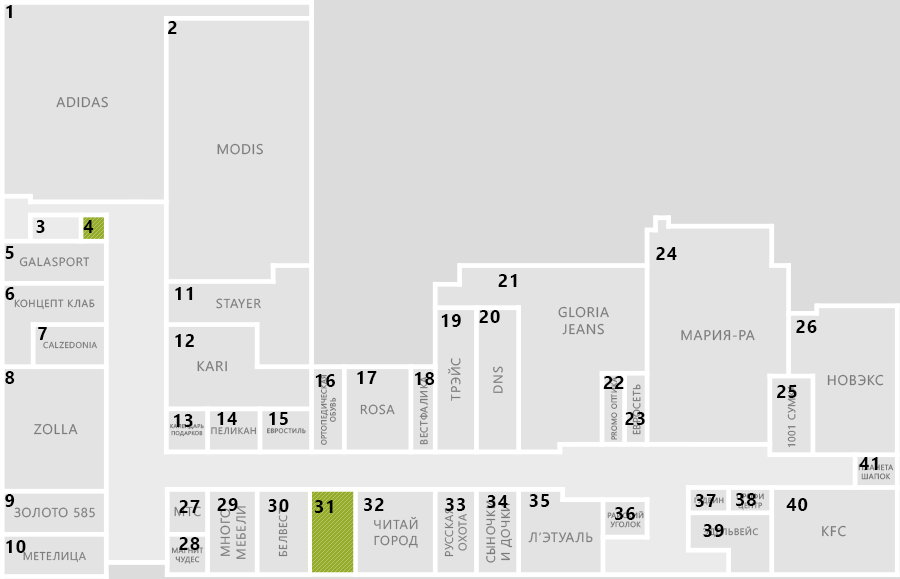
<style>
.page{position:relative;width:900px;height:579px;background:#e3e3e3}
.page>*{position:absolute;margin:0}
.t1{font:18px "SegoeUI-Bold";letter-spacing:0.05em;color:#000000;text-transform:uppercase}
.t2{font:14px "SegoeUI";letter-spacing:0.05em;color:#7c7c7c;text-transform:uppercase}
.t3{font:12px "SegoeUI";letter-spacing:0.05em;color:#7c7c7c;text-transform:uppercase}
.t4{font:10.3px "SegoeUI";letter-spacing:0.05em;color:#7c7c7c;text-transform:uppercase}
.t5{font:13.1px "SegoeUI";letter-spacing:0.05em;color:#7c7c7c;text-transform:uppercase}
.t6{font:8.4px "SegoeUI";letter-spacing:0.05em;color:#7c7c7c;text-transform:uppercase}
.t7{font:7.5px "SegoeUI";letter-spacing:0.05em;color:#7c7c7c;text-transform:uppercase}
.t8{font:5.6px "SegoeUI";letter-spacing:0.05em;color:#7c7c7c;text-transform:uppercase}
.t9{font:9.4px "SegoeUI";letter-spacing:0.05em;color:#7c7c7c;text-transform:uppercase}
.t10{font:6.6px "SegoeUI";letter-spacing:0.05em;color:#7c7c7c;text-transform:uppercase}
.t11{font:7.5px "SegoeUI";letter-spacing:0.05em;text-transform:uppercase}
.t12{font:11.2px "SegoeUI";letter-spacing:0.05em;color:#7c7c7c;text-transform:uppercase}
.t13{font:12.2px "SegoeUI";letter-spacing:0.05em;color:#7c7c7c;text-transform:uppercase}
.t14{font:13.5px "SegoeUI";letter-spacing:0.05em;color:#7c7c7c;text-transform:uppercase}
</style>
<div class="page">
<p class="t1" style="left:6px;top:5px;width:6px;height:13px">1</p>
<p class="t1" style="left:168px;top:21px;width:9px;height:13px">2</p>
<p class="t2" style="left:56px;top:96px;width:52px;height:12px">Adidas</p>
<p class="t2" style="left:217px;top:143px;width:46px;height:12px">MODIS</p>
<p class="t1" style="left:36px;top:220px;width:9px;height:13px">3</p>
<p class="t1" style="left:83px;top:220px;width:11px;height:13px">4</p>
<p class="t1" style="left:5px;top:246px;width:9px;height:13px">5</p>
<p class="t3" style="left:19px;top:257px;width:71px;height:10px">Galasport</p>
<p class="t1" style="left:656px;top:247px;width:21px;height:13px">24</p>
<p class="t1" style="left:498px;top:274px;width:19px;height:13px">21</p>
<p class="t1" style="left:5px;top:287px;width:10px;height:13px">6</p>
<p class="t1" style="left:175px;top:287px;width:18px;height:13px">11</p>
<p class="t4" style="left:14px;top:299px;width:81px;height:11px">Концепт Клаб</p>
<p class="t5" style="left:216px;top:298px;width:45px;height:11px">Stayer</p>
<p class="t1" style="left:441px;top:314px;width:20px;height:13px">19</p>
<p class="t1" style="left:479px;top:310px;width:21px;height:13px">20</p>
<p class="t2" style="left:558px;top:306px;width:51px;height:29px;text-align:center">Gloria<br>jeans</p>
<p class="t1" style="left:38px;top:327px;width:9px;height:13px">7</p>
<p class="t1" style="left:796px;top:320px;width:21px;height:13px">26</p>
<p class="t6" style="left:43px;top:341px;width:54px;height:8px">calzedonia</p>
<p class="t1" style="left:175px;top:334px;width:19px;height:13px">12</p>
<p class="t2" style="left:681px;top:330px;width:74px;height:11px">Мария-ра</p>
<p class="t2" style="left:197px;top:361px;width:30px;height:11px">Kari</p>
<p class="t5" style="left:448px;top:358px;width:13px;height:43px;rotate:-90deg">Трэйс</p>
<p class="t5" style="left:493px;top:366px;width:10px;height:27px;rotate:-90deg">Dns</p>
<p class="t1" style="left:5px;top:371px;width:10px;height:13px">8</p>
<p class="t1" style="left:315px;top:374px;width:20px;height:13px">16</p>
<p class="t7" style="left:321px;top:375px;width:15px;height:70px;text-align:center;rotate:-90deg">Ортопедическая<br>обувь</p>
<p class="t1" style="left:357px;top:371px;width:20px;height:13px">17</p>
<p class="t1" style="left:415px;top:372px;width:20px;height:13px">18</p>
<p class="t4" style="left:419px;top:376px;width:9px;height:69px;rotate:-90deg">Вестфалика</p>
<p class="t1" style="left:603px;top:376px;width:21px;height:13px">22</p>
<p class="t7" style="left:611px;top:377px;width:6px;height:63px;rotate:-90deg">Promo оптика</p>
<p class="t2" style="left:827px;top:374px;width:57px;height:12px">Новэкс</p>
<p class="t4" style="left:632px;top:384px;width:9px;height:51px;rotate:-90deg">Евросеть</p>
<p class="t1" style="left:777px;top:385px;width:20px;height:13px">25</p>
<p class="t4" style="left:787px;top:384px;width:9px;height:63px;rotate:-90deg">1001 сумка</p>
<p class="t1" style="left:174px;top:414px;width:19px;height:13px">13</p>
<p class="t1" style="left:217px;top:412px;width:20px;height:13px">14</p>
<p class="t1" style="left:269px;top:412px;width:19px;height:13px">15</p>
<p class="t5" style="left:360px;top:404px;width:35px;height:11px">rOSA</p>
<p class="t1" style="left:625px;top:412px;width:20px;height:13px">23</p>
<p class="t2" style="left:33px;top:423px;width:45px;height:12px">Zolla</p>
<p class="t8" style="left:170px;top:424px;width:34px;height:13px;text-align:center">Календарь<br>подарков</p>
<p class="t9" style="left:211px;top:427px;width:45px;height:8px">Пеликан</p>
<p class="t10" style="left:267px;top:428px;width:39px;height:6px">Евростиль</p>
<p class="t1" style="left:859px;top:457px;width:19px;height:13px">41</p>
<p class="t7" style="left:858px;top:464px;width:36px;height:16px;text-align:center">Планета<br>шапок</p>
<p class="t1" style="left:5px;top:494px;width:10px;height:13px">9</p>
<p class="t1" style="left:487px;top:495px;width:21px;height:13px">34</p>
<p class="t1" style="left:529px;top:494px;width:21px;height:13px">35</p>
<p class="t11" style="left:694px;top:497px;width:30px;height:8px">Гудвин</p>
<p class="t1" style="left:695px;top:494px;width:21px;height:13px">37</p>
<p class="t1" style="left:736px;top:493px;width:20px;height:13px">38</p>
<p class="t5" style="left:14px;top:507px;width:81px;height:11px">Золото 585</p>
<p class="t5" style="left:174px;top:506px;width:27px;height:11px">Мтс</p>
<p class="t1" style="left:179px;top:500px;width:21px;height:13px">27</p>
<p class="t1" style="left:217px;top:498px;width:21px;height:13px">29</p>
<p class="t5" style="left:220px;top:506px;width:26px;height:53px;text-align:center;rotate:-90deg">Много<br>мебели</p>
<p class="t1" style="left:268px;top:499px;width:21px;height:13px">30</p>
<p class="t12" style="left:278px;top:508px;width:10px;height:49px;rotate:-90deg">Белвест</p>
<p class="t1" style="left:315px;top:500px;width:18px;height:13px">31</p>
<p class="t1" style="left:364px;top:498px;width:20px;height:13px">32</p>
<p class="t12" style="left:444px;top:508px;width:23px;height:49px;text-align:center;rotate:-90deg">Русская<br>охота</p>
<p class="t1" style="left:445px;top:498px;width:20px;height:13px">33</p>
<p class="t13" style="left:486px;top:500px;width:27px;height:63px;text-align:center;rotate:-90deg">Сыночки<br>и дочки</p>
<p class="t1" style="left:615px;top:507px;width:20px;height:13px">36</p>
<p class="t1" style="left:786px;top:498px;width:22px;height:13px">40</p>
<p class="t5" style="left:374px;top:516px;width:44px;height:32px;text-align:center">Читай<br>город</p>
<p class="t11" style="left:607px;top:511px;width:37px;height:17px;text-align:center">Райский<br>уголок</p>
<p class="t14" style="left:528px;top:532px;width:65px;height:11px">Л’ЭТУАЛЬ</p>
<p class="t1" style="left:703px;top:524px;width:21px;height:13px">39</p>
<p class="t2" style="left:822px;top:525px;width:24px;height:12px">KFC</p>
<p class="t1" style="left:6px;top:540px;width:20px;height:13px">10</p>
<p class="t1" style="left:179px;top:537px;width:21px;height:13px">28</p>
<p class="t12" style="left:23px;top:551px;width:63px;height:12px">Метелица</p>
<p class="t7" style="left:172px;top:547px;width:32px;height:17px;text-align:center">Магнит<br>чудес</p>
</div>
